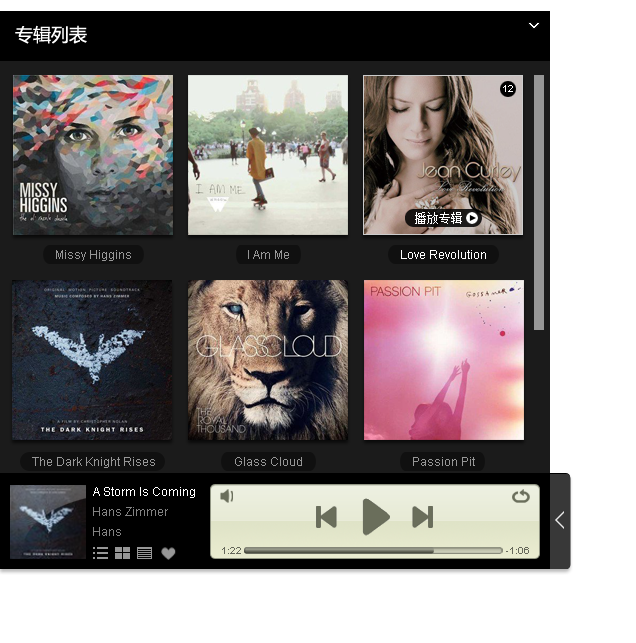
<style>
.page{position:relative;width:636px;height:643px;background:#ffffff}
.page>*{position:absolute;margin:0}
.t1{font:18px "MicrosoftYaHei"}
.t2{font:18px "MicrosoftYaHei";color:#ffffff}
.t3{font:10px "ArialMT";color:#ffffff}
.t4{font:12px "SimSun";color:#ffffff}
.t5{font:12px "ArialMT";color:#979797}
.t6{font:12px "ArialMT";color:#ffffff}
.t7{font:12px "ArialMT";color:#828282}
.t8{font:10px "ArialMT";color:#65675a}
</style>
<div class="page">
<p class="t1" style="left:15px;top:25px;width:72px;height:19px">播放列表</p>
<p class="t2" style="left:15px;top:25px;width:72px;height:19px">专辑列表</p>
<p class="t3" style="left:503px;top:85px;width:10px;height:7px">12</p>
<p class="t4" style="left:415px;top:212px;width:47px;height:12px">播放专辑</p>
<p class="t5" style="left:56px;top:250px;width:75px;height:11px">Missy Higgins</p>
<p class="t5" style="left:248px;top:250px;width:41px;height:9px">I Am Me</p>
<p class="t6" style="left:401px;top:250px;width:85px;height:9px">Love Revolution</p>
<p class="t5" style="left:32px;top:457px;width:123px;height:11px">The Dark Knight Rises</p>
<p class="t5" style="left:235px;top:457px;width:67px;height:9px">Glass Cloud</p>
<p class="t5" style="left:413px;top:457px;width:62px;height:9px">Passion Pit</p>
<p class="t6" style="left:93px;top:487px;width:102px;height:11px">A Storm Is Coming</p>
<p class="t7" style="left:93px;top:507px;width:75px;height:9px">Hans Zimmer</p>
<p class="t7" style="left:93px;top:527px;width:28px;height:9px">Hans</p>
<p class="t8" style="left:222px;top:547px;width:19px;height:7px">1:22</p>
<p class="t8" style="left:506px;top:547px;width:23px;height:7px">-1:06</p>
</div>
